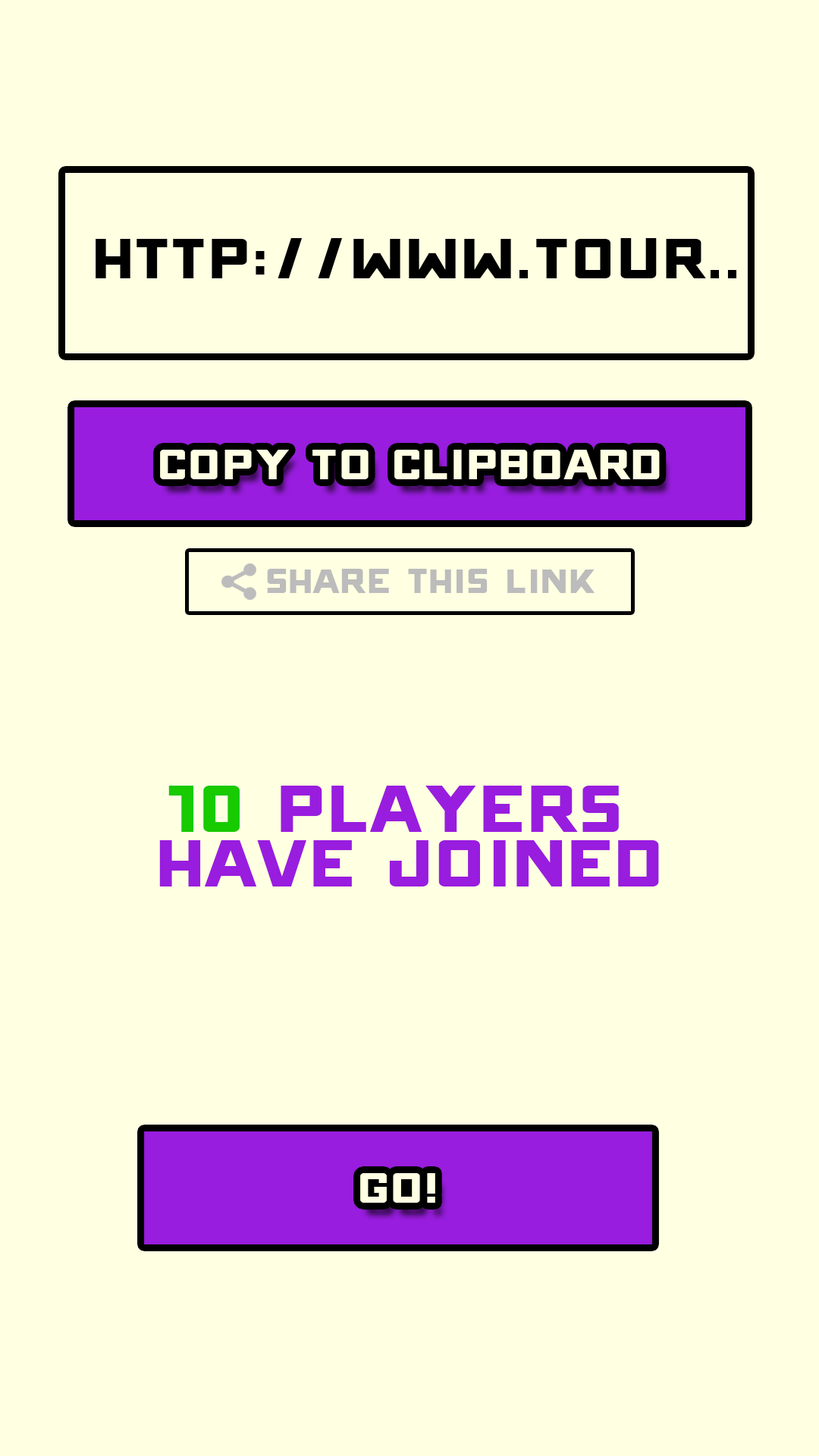
<style>
.page{position:relative;width:819px;height:1456px;background:#ffffe2}
.page>*{position:absolute;margin:0}
.t1{font:91px "ONRAMP";color:#000000;scale:1.1 1}
.t2{font:68.2px "ONRAMP";color:#ffffe3;scale:1.1 1}
.t3{font:54.6px "ONRAMP";color:#bcbcbc;scale:1.1 1}
.t4{font:106.2px/54.6px "ONRAMP";color:#981dde;scale:1.1 1}
.t5{font:106.2px/54.6px "ONRAMP";color:#18ca00;scale:1.1 1}
</style>
<div class="page">
<p class="t1" style="left:96px;top:238px;width:641px;height:40px">http://www.tour..</p>
<p class="t2" style="left:160px;top:450px;width:500px;height:29px">Copy to clipboard</p>
<p class="t3" style="left:267px;top:569px;width:328px;height:24px">share this link</p>
<p class="t4" style="left:159px;top:786px;width:500px;height:100px;text-align:center"><span class="t5">10 </span>Players <br>have joined</p>
<p class="t2" style="left:360px;top:1173px;width:75px;height:30px">GO!</p>
</div>
